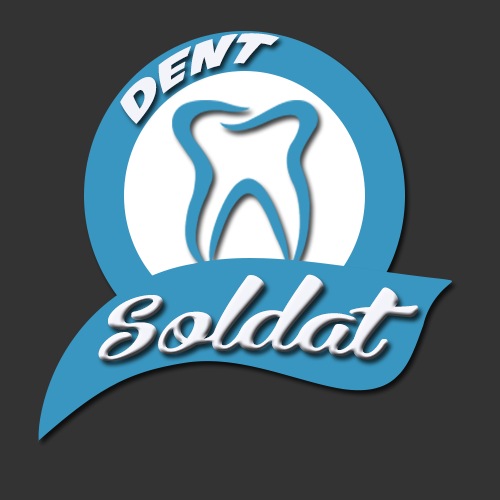
<style>
.page{position:relative;width:500px;height:500px;background:#333333}
.page>*{position:absolute;margin:0}
.t1{font:37.4px "AvengeanceMightiestAvenger";color:#f3f3fa;scale:1.28 1}
.t2{font:83.3px "Bira-PERSONALUSEONLY";color:#f3f3fa;scale:1.22 1}
</style>
<div class="page">
<p class="t1" style="left:120px;top:33px;width:160px;height:91px;rotate:-25deg">dent</p>
<p class="t2" style="left:98px;top:274px;width:321px;height:87px">Soldat</p>
</div>
